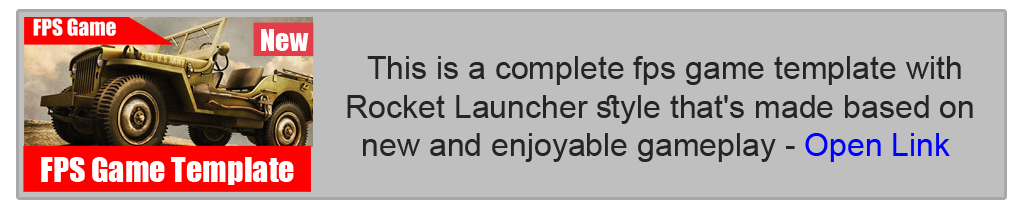
<style>
.page{position:relative;width:1024px;height:210px;background:#bfbfbf}
.page>*{position:absolute;margin:0}
.t1{font:32px "ArialMT";color:#252525}
.t2{font:32px "ArialMT";color:#0000ff}
.t3{font:32px "Impact";color:#ffffff}
</style>
<div class="page">
<p class="t1" style="left:347px;top:56px;width:626px;height:106px;text-align:center">This is a complete fps game template with <br>Rocket Launcher style that's made based on<br> new and enjoyable gameplay - <span class="t2">Open Link</span></p>
<p class="t3" style="left:41px;top:157px;width:253px;height:28px">FPS Game Template</p>
</div>
